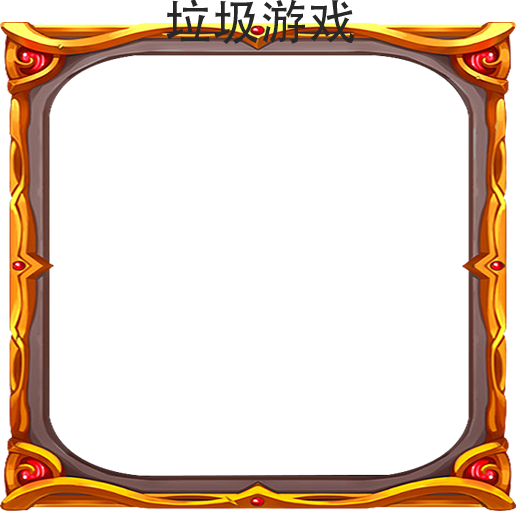
<style>
.page{position:relative;width:516px;height:511px;background:#ffffff}
.page>*{position:absolute;margin:0}
.t1{font:48px "AdobeHeitiStd-Regular";color:#282828}
</style>
<div class="page">
<p class="t1" style="left:166px;top:0px;width:189px;height:44px">垃圾游戏</p>
</div>
